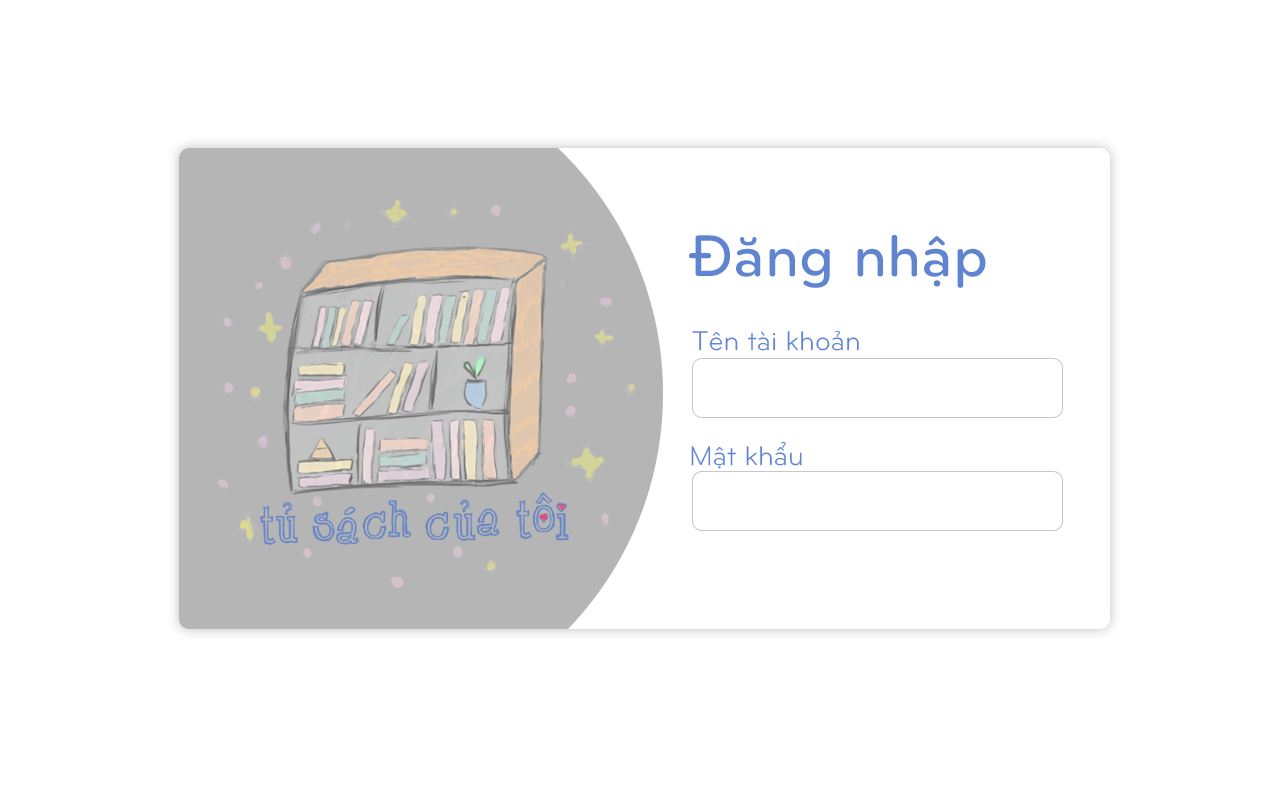
<style>
.page{position:relative;width:1280px;height:786px;background:#ffffff}
.page>*{position:absolute;margin:0}
.t1{font:61px "UTMBryantLGBold";color:#5f85d1}
.t2{font:28px "UTM-BryantLG";color:#5f85d1}
</style>
<div class="page">
<p class="t1" style="left:689px;top:235px;width:297px;height:53px">Đăng nhập</p>
<p class="t2" style="left:692px;top:330px;width:167px;height:21px">Tên tài khoản</p>
<p class="t2" style="left:691px;top:441px;width:111px;height:28px">Mật khẩu</p>
</div>
